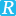
<style>
.page{position:relative;width:16px;height:16px;background:#20b9eb}
.page>*{position:absolute;margin:0}
.t1{font:18px "ACaslonPro-Regular";color:#ffffff;font-style:italic}
</style>
<div class="page">
<p class="t1" style="left:1px;top:1px;width:13px;height:13px">R</p>
</div>
